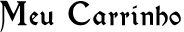
<style>
.page{position:relative;width:184px;height:32px;background:#ffffff}
.page>*{position:absolute;margin:0}
.t1{font:24px "Kelmscott-Regular";letter-spacing:0.05em;color:#000000}
.t2{font:30px "Kelmscott-Regular";letter-spacing:0.05em;color:#000000}
</style>
<div class="page">
<p class="t1" style="left:0px;top:0px;width:181px;height:32px"><span class="t2">M</span>eu <span class="t2">C</span>arrinho</p>
</div>
